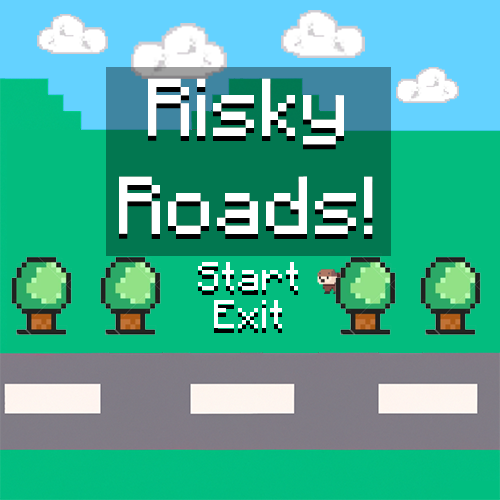
<style>
.page{position:relative;width:500px;height:500px;background:#03bc7e}
.page>*{position:absolute;margin:0}
.t1{font:81.6px "Minecraft-Regular";color:#ffffff}
.t2{font:39.9px "Minecraft-Regular";color:#ffffff}
</style>
<div class="page">
<p class="t1" style="left:119px;top:78px;width:254px;height:156px;text-align:center">Risky<br>Roads!</p>
<p class="t2" style="left:198px;top:262px;width:100px;height:28px">Start</p>
<p class="t2" style="left:214px;top:300px;width:68px;height:28px">Exit</p>
</div>
